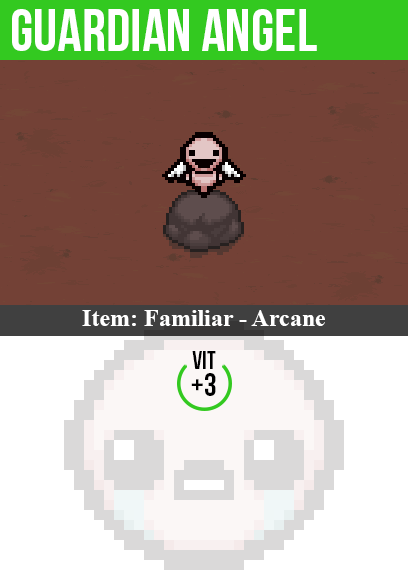
<style>
.page{position:relative;width:408px;height:585px;background:#734136}
.page>*{position:absolute;margin:0}
.t1{font:60px "BebasNeue";color:#ffffff}
.t2{font:24px "TimesNewRomanPS-BoldMT";color:#ffffff}
.t3{font:25px "BebasNeue";color:#000000}
.t4{font:32px "BebasNeue";color:#000000}
</style>
<div class="page">
<p class="t1" style="left:12px;top:9px;width:305px;height:42px">guardian angel</p>
<p class="t2" style="left:82px;top:310px;width:243px;height:16px">Item: Familiar - Arcane</p>
<p class="t3" style="left:192px;top:351px;width:24px;height:18px">vit</p>
<p class="t4" style="left:191px;top:373px;width:25px;height:23px">+3</p>
</div>
